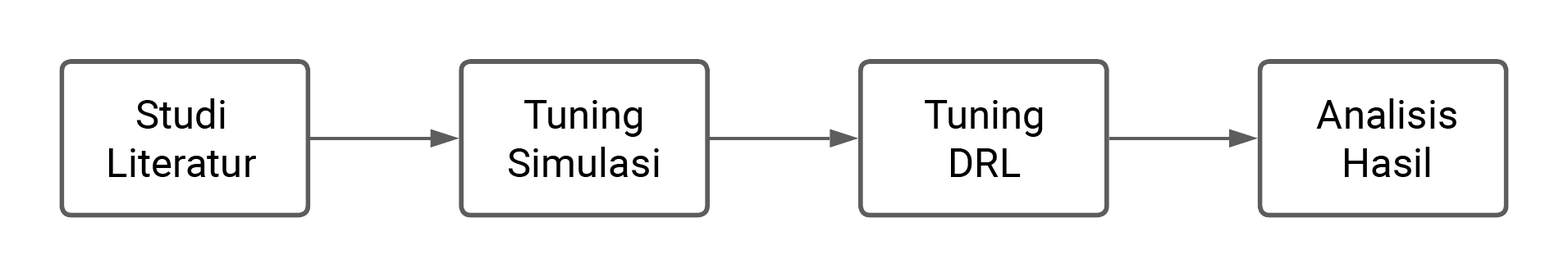
<style>
.page{position:relative;width:1568px;height:277px;background:#ffffff}
.page>*{position:absolute;margin:0}
.t1{font:40.4px "Roboto-Regular";color:#000000}
</style>
<div class="page">
<p class="t1" style="left:109px;top:98px;width:147px;height:79px;text-align:center">Studi<br>Literatur</p>
<p class="t1" style="left:508px;top:100px;width:151px;height:77px;text-align:center">Tuning<br>Simulasi</p>
<p class="t1" style="left:925px;top:100px;width:118px;height:77px;text-align:center">Tuning<br>DRL</p>
<p class="t1" style="left:1316px;top:98px;width:140px;height:79px;text-align:center">Analisis<br>Hasil</p>
</div>
